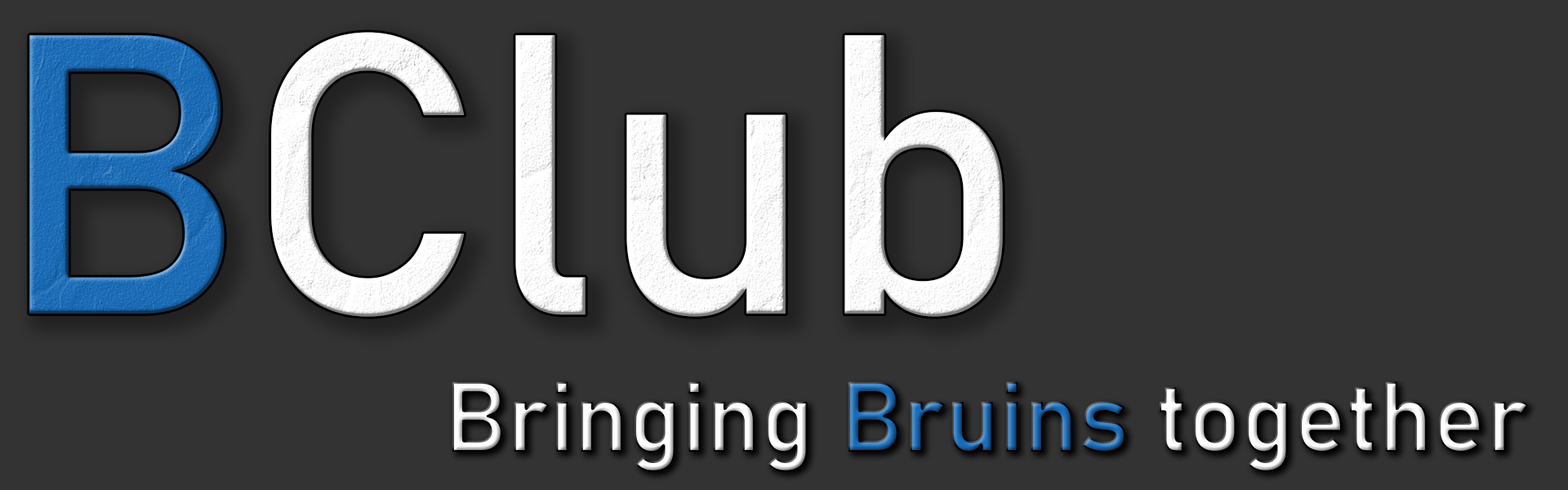
<style>
.page{position:relative;width:1568px;height:490px;background:#333333}
.page>*{position:absolute;margin:0}
.t1{font:392px "Bahnschrift";color:#ffffff}
.t2{font:392px "Bahnschrift";color:#1a6cb8}
.t3{font:98px "Bahnschrift-SemiBold"}
</style>
<div class="page">
<p class="t1" style="left:29px;top:32px;width:974px;height:285px"><span class="t2">B</span>Club</p>
<p class="t3" style="left:452px;top:381px;width:1077px;height:91px">Bringing Bruins together</p>
</div>
